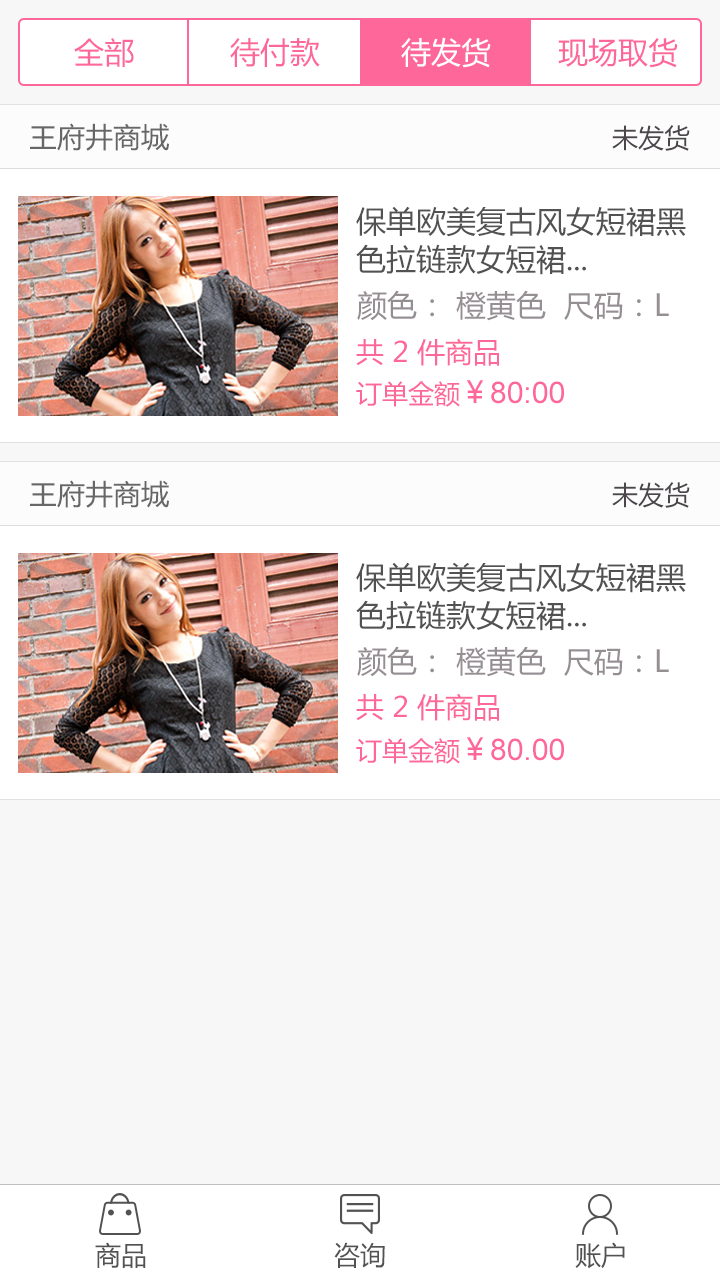
<style>
.page{position:relative;width:720px;height:1280px;background:#ffffff}
.page>*{position:absolute;margin:0}
.t1{font:30px "MicrosoftYaHei";color:#fd679a}
.t2{font:30px "MicrosoftYaHei";color:#ffffff}
.t3{font:28px "MicrosoftYaHei";color:#666666}
.t4{font:26px "MicrosoftYaHei";color:#4a4649}
.t5{font:30px/38px "MicrosoftYaHei";color:#525252}
.t6{font:30px "MicrosoftYaHei";color:#958f93}
.t7{font:28px "MicrosoftYaHei";color:#fd679a}
.t8{font:30px "ArialMT";color:#fd679a}
.t9{font:26px "MicrosoftYaHei";color:#fd679a}
.t10{font:26px "MicrosoftYaHei";color:#525252}
</style>
<div class="page">
<p class="t1" style="left:74px;top:38px;width:60px;height:29px">全部</p>
<p class="t1" style="left:230px;top:38px;width:90px;height:29px">待付款</p>
<p class="t2" style="left:401px;top:37px;width:90px;height:31px">待发货</p>
<p class="t1" style="left:558px;top:38px;width:120px;height:30px">现场取货</p>
<p class="t3" style="left:30px;top:123px;width:139px;height:28px">王府井商城</p>
<p class="t4" style="left:612px;top:125px;width:78px;height:26px">未发货</p>
<p class="t5" style="left:356px;top:206px;width:330px;height:69px">保单欧美复古风女短裙黑<br>色拉链款女短裙...</p>
<p class="t6" style="left:357px;top:290px;width:312px;height:31px">颜色： 橙黄色  尺码：L</p>
<p class="t7" style="left:356px;top:338px;width:143px;height:28px">共 2 件商品</p>
<p class="t8" style="left:356px;top:380px;width:208px;height:27px"><span class="t9">订单金额</span><span class="t1">￥</span>80:00</p>
<p class="t3" style="left:30px;top:480px;width:139px;height:28px">王府井商城</p>
<p class="t4" style="left:612px;top:482px;width:78px;height:26px">未发货</p>
<p class="t5" style="left:356px;top:562px;width:330px;height:69px">保单欧美复古风女短裙黑<br>色拉链款女短裙...</p>
<p class="t6" style="left:357px;top:646px;width:312px;height:31px">颜色： 橙黄色  尺码：L</p>
<p class="t7" style="left:356px;top:693px;width:143px;height:28px">共 2 件商品</p>
<p class="t8" style="left:356px;top:737px;width:208px;height:27px"><span class="t9">订单金额</span><span class="t1">￥</span>80.00</p>
<p class="t10" style="left:95px;top:1242px;width:51px;height:26px">商品</p>
<p class="t10" style="left:334px;top:1242px;width:51px;height:26px">咨询</p>
<p class="t10" style="left:575px;top:1242px;width:50px;height:27px">账户</p>
</div>
